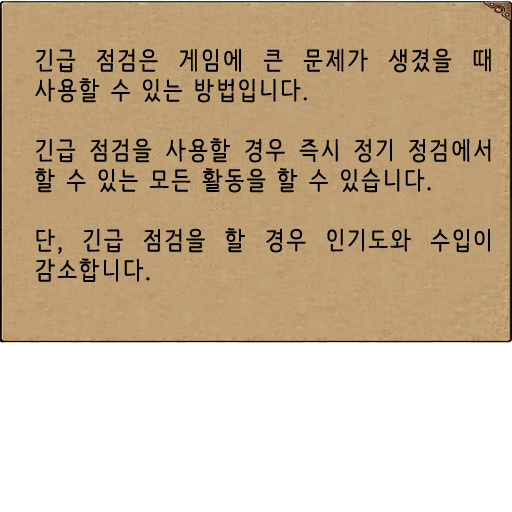
<style>
.page{position:relative;width:512px;height:512px;background:#ffffff}
.page>*{position:absolute;margin:0}
.t1{font:25px "NanumBarunpen";letter-spacing:0.075em;color:#000000;font-weight:bold}
</style>
<div class="page">
<p class="t1" style="left:35px;top:48px;width:456px;height:234px;text-align:justify">긴급 점검은 게임에 큰 문제가 생겼을 때 사용할 수 있는 방법입니다.<br><br>긴급 점검을 사용할 경우 즉시 정기 정검에서 할 수 있는 모든 활동을 할 수 있습니다.<br><br>단, 긴급 점검을 할 경우 인기도와 수입이 감소합니다.</p>
</div>
